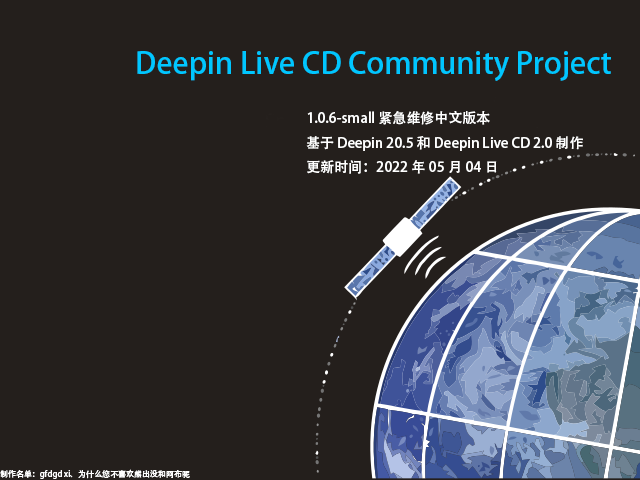
<style>
.page{position:relative;width:640px;height:480px;background:#241f1c}
.page>*{position:absolute;margin:0}
.t1{font:30px "AdobeHeitiStd-Regular";color:#00c6ff}
.t2{font:14px "AdobeHeitiStd-Regular";color:#ffffff}
.t3{font:8px "AdobeHeitiStd-Regular";color:#ffffff}
</style>
<div class="page">
<p class="t1" style="left:137px;top:51px;width:474px;height:30px">Deepin Live CD Community Project</p>
<p class="t2" style="left:306px;top:111px;width:277px;height:63px">1.0.6-small 紧急维修中文版本<br>基于 Deepin 20.5 和 Deepin Live CD 2.0 制作<br>更新时间：2022年05月04日</p>
<p class="t3" style="left:0px;top:469px;width:190px;height:10px">制作名单：gfdgd xi、为什么您不喜欢熊出没和阿布呢</p>
</div>
